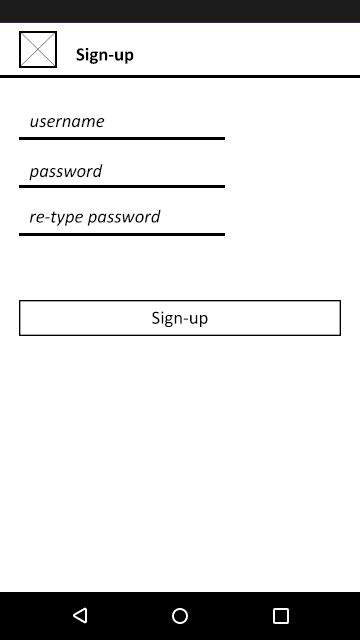
<style>
.page{position:relative;width:360px;height:640px;background:#ffffff}
.page>*{position:absolute;margin:0}
.t1{font:18.9px "Calibri-Bold";color:#000000}
.t2{font:19px "Calibri-Italic";color:#000000}
.t3{font:18.7px "Calibri-Italic";color:#000000}
.t4{font:18.6px "Calibri";color:#000000}
</style>
<div class="page">
<p class="t1" style="left:76px;top:48px;width:58px;height:16px">Sign-up</p>
<p class="t2" style="left:30px;top:118px;width:75px;height:10px">username</p>
<p class="t2" style="left:29px;top:164px;width:74px;height:17px">password</p>
<p class="t3" style="left:29px;top:209px;width:132px;height:17px">re-type password</p>
<p class="t4" style="left:152px;top:311px;width:56px;height:16px">Sign-up</p>
</div>
